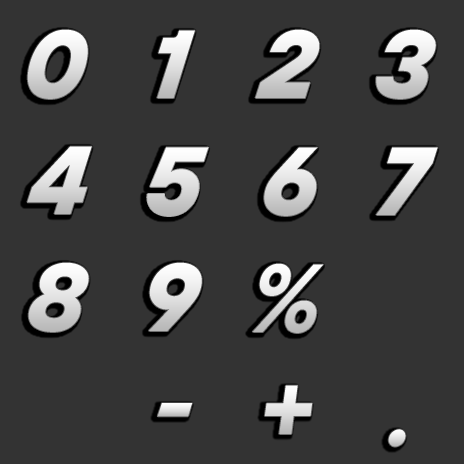
<style>
.page{position:relative;width:464px;height:464px;background:#333333}
.page>*{position:absolute;margin:0}
.t1{font:97.2px "TTInterphasesProTrl-XBdIt";scale:0.94 1}
.t2{font:97.2px "TTInterphasesProTrl-XBdIt";color:#ede8e2;scale:0.94 1}
.t3{font:97.2px "TTInterphasesProTrl-XBdIt";color:#efefef;scale:0.94 1}
</style>
<div class="page">
<p class="t1" style="left:27px;top:29px;width:61px;height:70px">0</p>
<p class="t1" style="left:27px;top:29px;width:61px;height:70px">0</p>
<p class="t2" style="left:157px;top:30px;width:38px;height:68px">1</p>
<p class="t2" style="left:157px;top:30px;width:38px;height:68px">1</p>
<p class="t1" style="left:255px;top:29px;width:65px;height:69px">2</p>
<p class="t1" style="left:255px;top:29px;width:65px;height:69px">2</p>
<p class="t1" style="left:376px;top:29px;width:60px;height:70px">3</p>
<p class="t1" style="left:376px;top:29px;width:60px;height:70px">3</p>
<p class="t1" style="left:27px;top:146px;width:65px;height:68px">4</p>
<p class="t1" style="left:27px;top:146px;width:65px;height:68px">4</p>
<p class="t1" style="left:147px;top:147px;width:62px;height:69px">5</p>
<p class="t1" style="left:147px;top:147px;width:62px;height:69px">5</p>
<p class="t1" style="left:264px;top:147px;width:54px;height:69px">6</p>
<p class="t1" style="left:264px;top:147px;width:54px;height:69px">6</p>
<p class="t3" style="left:376px;top:147px;width:62px;height:68px">7</p>
<p class="t3" style="left:376px;top:147px;width:62px;height:68px">7</p>
<p class="t1" style="left:28px;top:262px;width:61px;height:70px">8</p>
<p class="t1" style="left:28px;top:262px;width:61px;height:70px">8</p>
<p class="t2" style="left:149px;top:262px;width:53px;height:69px">9</p>
<p class="t2" style="left:149px;top:262px;width:53px;height:69px">9</p>
<p class="t1" style="left:252px;top:263px;width:72px;height:70px">%</p>
<p class="t1" style="left:252px;top:263px;width:72px;height:70px">%</p>
<p class="t2" style="left:264px;top:385px;width:49px;height:49px">+</p>
<p class="t1" style="left:157px;top:403px;width:36px;height:14px">-</p>
<p class="t2" style="left:388px;top:429px;width:18px;height:18px">.</p>
</div>
